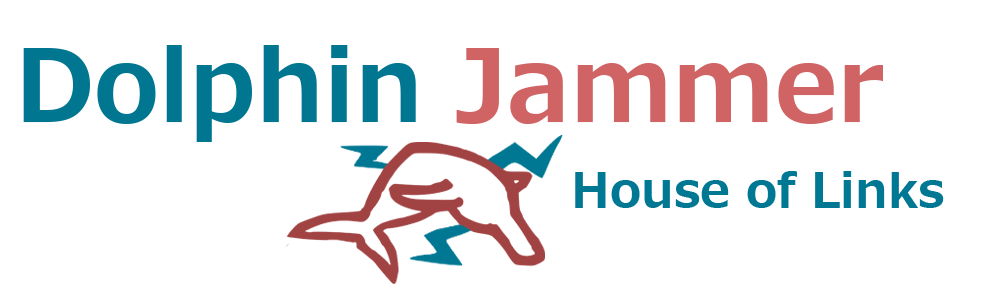
<style>
.page{position:relative;width:992px;height:300px;background:#ffffff}
.page>*{position:absolute;margin:0}
.t1{font:100px "MeiryoUI-Bold";color:#007691}
.t2{font:100px "MeiryoUI-Bold";color:#d06364}
.t3{font:48px "MeiryoUI-Bold";color:#017893}
</style>
<div class="page">
<p class="t1" style="left:23px;top:45px;width:860px;height:97px">Dolphin <span class="t2">Jammer</span></p>
<p class="t3" style="left:575px;top:171px;width:369px;height:37px">House of Links</p>
</div>
